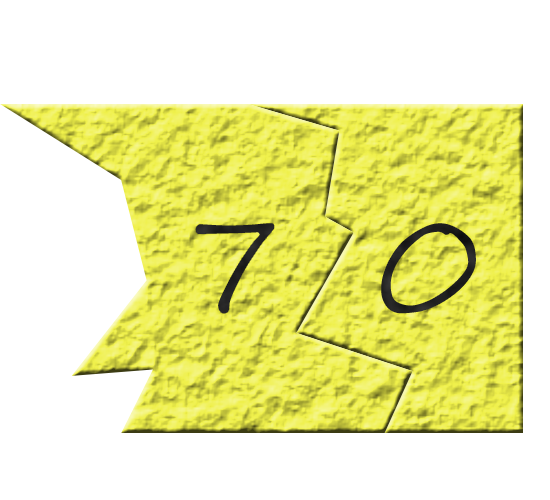
<style>
.page{position:relative;width:550px;height:500px;background:#ffffff}
.page>*{position:absolute;margin:0}
.t1{font:140px "SegoeScript";color:#242424}
.t2{font:140px "SegoeScript"}
</style>
<div class="page">
<p class="t1" style="left:194px;top:222px;width:82px;height:93px">7</p>
<p class="t2" style="left:379px;top:221px;width:99px;height:95px">0</p>
</div>
